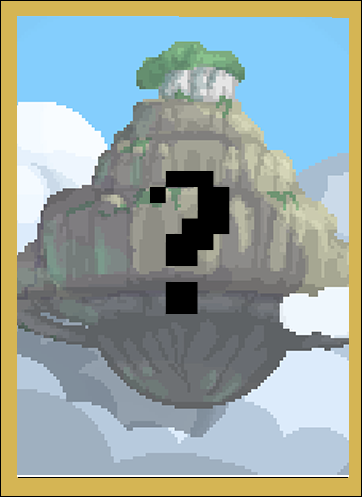
<style>
.page{position:relative;width:362px;height:497px}
.page>*{position:absolute;margin:0}
.t1{font:140px "DePixel-Bold";color:#000000}
</style>
<div class="page">
<p class="t1" style="left:150px;top:171px;width:80px;height:143px">?</p>
</div>
